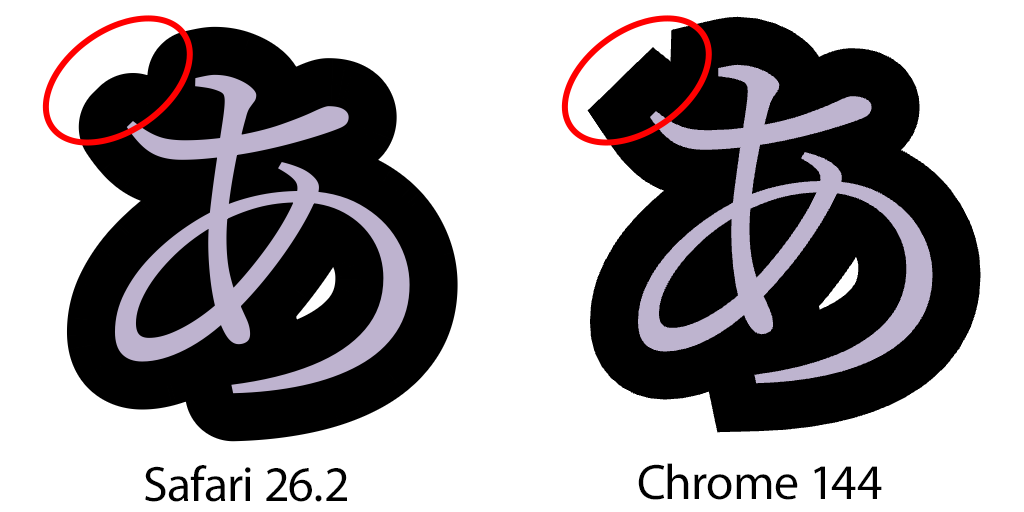
<style>
.page{position:relative;width:1024px;height:512px;background:#ffffff}
.page>*{position:absolute;margin:0}
.t1{font:50px "MyriadPro-Regular";color:#000000}
</style>
<div class="page">
<p class="t1" style="left:145px;top:465px;width:202px;height:37px">Safari 26.2</p>
<p class="t1" style="left:638px;top:463px;width:244px;height:37px">Chrome 144</p>
</div>
